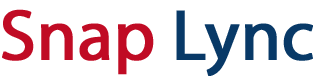
<style>
.page{position:relative;width:316px;height:76px;background:#ffffff}
.page>*{position:absolute;margin:0}
.t1{font:72px "MyriadPro-Regular";letter-spacing:-0.01em;color:#c00b24;font-weight:bold}
.t2{font:72px "MyriadPro-Regular";letter-spacing:-0.01em;color:#083967;font-weight:bold}
</style>
<div class="page">
<p class="t1" style="left:2px;top:9px;width:311px;height:67px">Snap <span class="t2">Lync</span></p>
</div>
